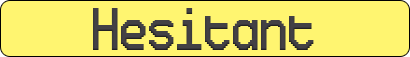
<style>
.page{position:relative;width:410px;height:57px;background:#fff570}
.page>*{position:absolute;margin:0}
.t1{font:62.5px "Ticketing";color:#434145}
</style>
<div class="page">
<p class="t1" style="left:93px;top:8px;width:221px;height:42px">Hesitant</p>
</div>
